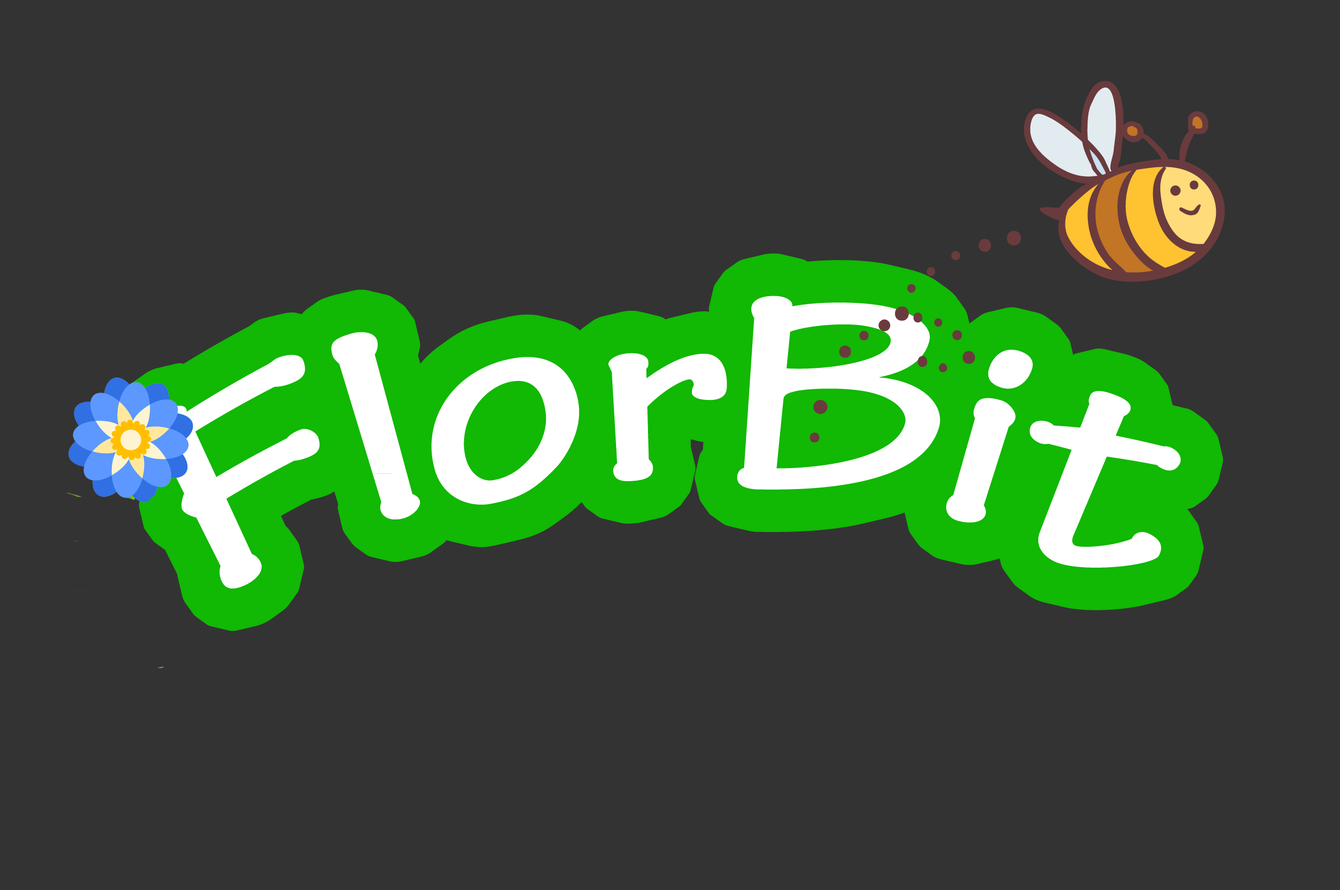
<style>
.page{position:relative;width:1340px;height:890px;background:#333333}
.page>*{position:absolute;margin:0}
.t1{font:291.7px "TektonPro-Bold";color:#ffffff}
</style>
<div class="page">
<p class="t1" style="left:149px;top:296px;width:1032px;height:292px">FlorBit</p>
</div>
